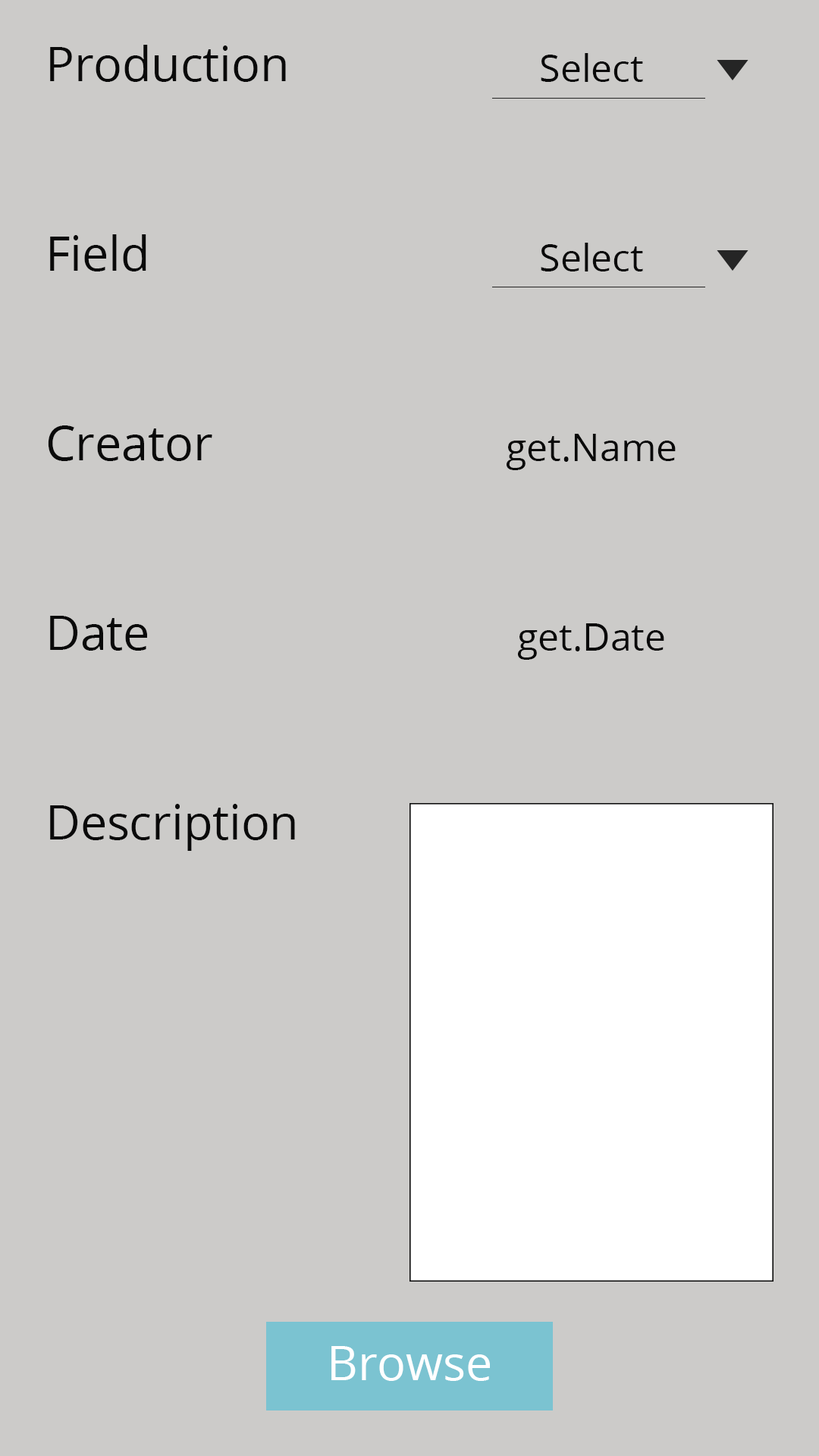
<style>
.page{position:relative;width:819px;height:1456px;background:#cccbc9}
.page>*{position:absolute;margin:0}
.t1{font:47.4px/94.8px "OpenSans";color:#0a0a0a}
.t2{font:37.9px/94.8px "OpenSans";color:#0a0a0a}
.t3{font:47.4px "OpenSans";color:#ffffff}
</style>
<div class="page">
<p class="t1" style="left:48px;top:45px;width:247px;height:806px">Production<br><br>Field<br><br>Creator<br><br>Date<br><br>Description</p>
<p class="t2" style="left:507px;top:53px;width:169px;height:607px;text-align:center">Select<br><br>Select<br><br>get.Name<br><br>get.Date</p>
<p class="t3" style="left:331px;top:1346px;width:159px;height:35px">Browse</p>
</div>
